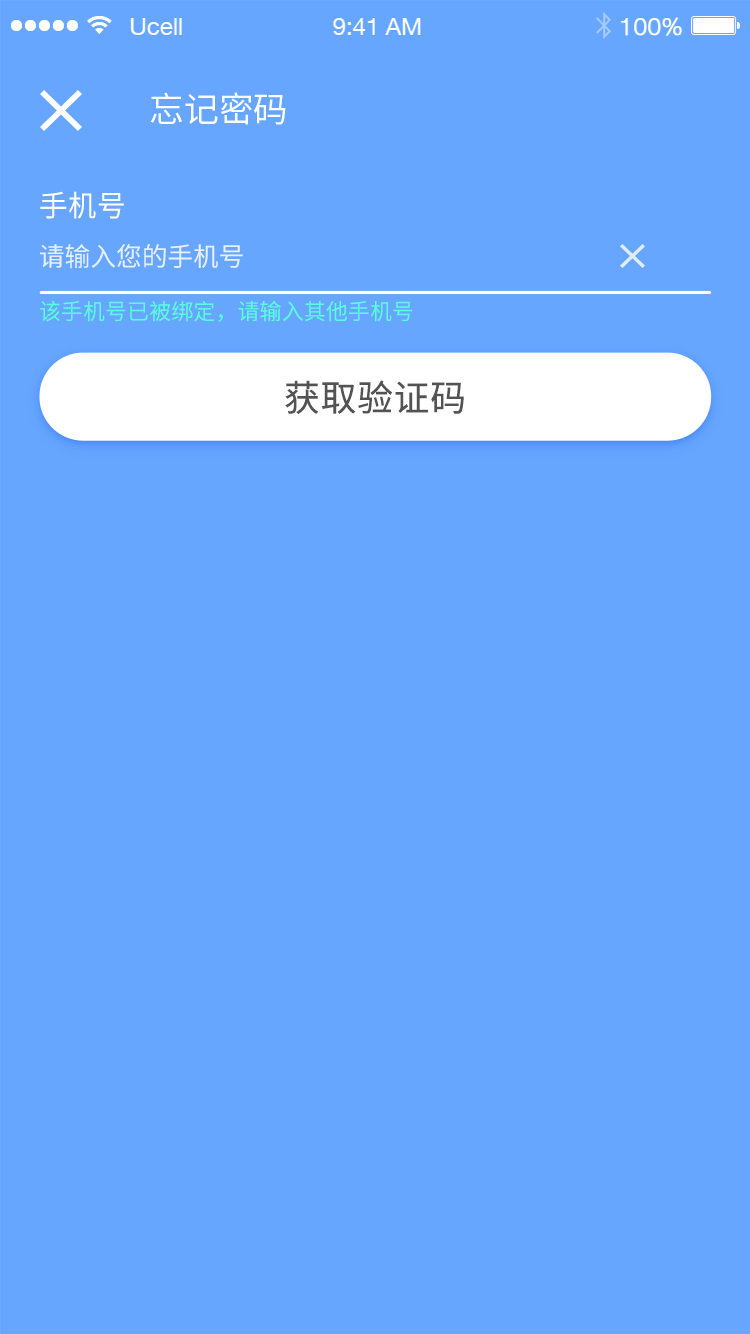
<style>
.page{position:relative;width:750px;height:1334px;background:#66a6ff}
.page>*{position:absolute;margin:0}
.t1{font:34.9px "NotoSansHans-Regular";color:#ffffff}
.t2{font:29.3px "NotoSansHans-Regular";color:#ffffff;text-transform:uppercase}
.t3{font:26px "NotoSansHans-Regular";color:#e6efff;text-transform:uppercase}
.t4{font:22.2px "NotoSansHans-Regular";color:#57ffda;text-transform:uppercase}
.t5{font:36.1px "NotoSansHans-Regular";letter-spacing:0.02em;color:#535353}
</style>
<div class="page">
<p class="t1" style="left:150px;top:92px;width:136px;height:33px">忘记密码</p>
<p class="t2" style="left:40px;top:191px;width:84px;height:28px">手机号</p>
<p class="t3" style="left:40px;top:244px;width:203px;height:25px">请输入您的手机号</p>
<p class="t4" style="left:40px;top:300px;width:373px;height:22px">该手机号已被绑定，请输入其他手机号</p>
<p class="t5" style="left:285px;top:380px;width:179px;height:34px">获取验证码</p>
</div>
